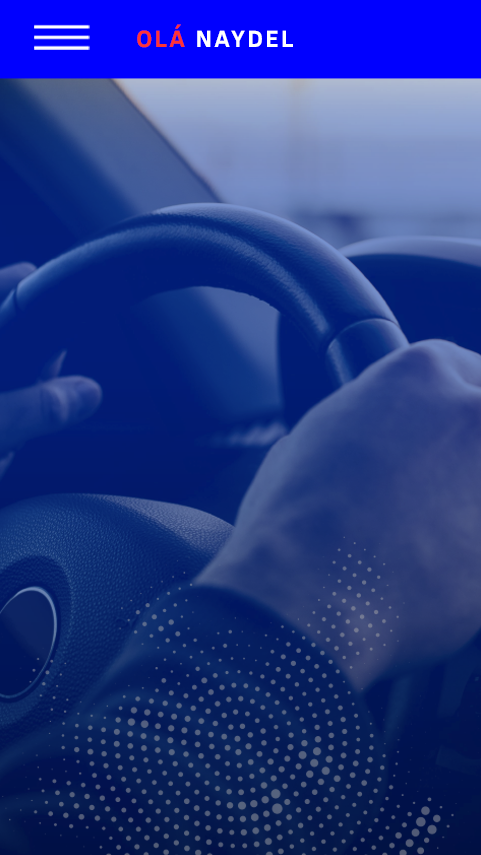
<style>
.page{position:relative;width:481px;height:855px}
.page>*{position:absolute;margin:0}
.t1{font:24px "ClearSans-Bold";letter-spacing:0.1em;color:#ffffff}
.t2{font:24px "ClearSans-Bold";letter-spacing:0.1em;color:#ff3333}
</style>
<div class="page">
<p class="t1" style="left:137px;top:24px;width:156px;height:24px"><span class="t2">OLÁ</span> NAYDEL</p>
</div>
